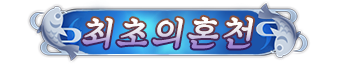
<style>
.page{position:relative;width:338px;height:65px;background:#ffffff}
.page>*{position:absolute;margin:0}
.t1{font:35px "SDKukdetopokki-aLt";letter-spacing:0.12em;font-style:italic;scale:0.96 1}
</style>
<div class="page">
<p class="t1" style="left:82px;top:16px;width:171px;height:33px">최초의혼천</p>
</div>
